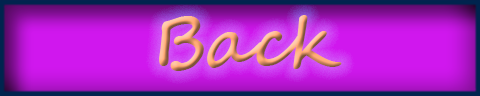
<style>
.page{position:relative;width:480px;height:96px}
.page>*{position:absolute;margin:0}
.t1{font:70.9px "SegoeScript-Bold"}
</style>
<div class="page">
<p class="t1" style="left:159px;top:15px;width:183px;height:56px">Back</p>
</div>
